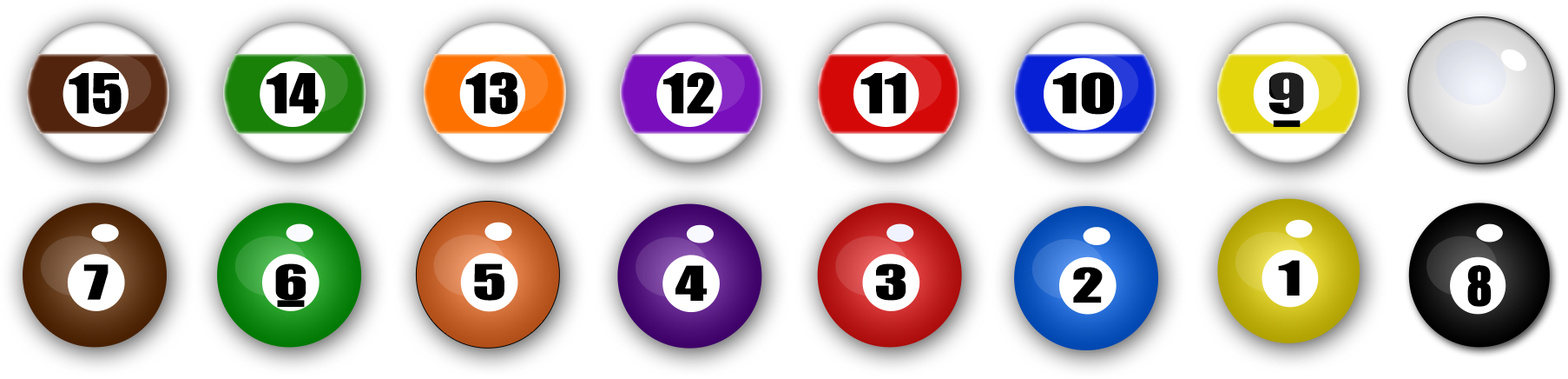
<style>
.page{position:relative;width:1568px;height:379px;background:#ffffff}
.page>*{position:absolute;margin:0}
.t1{font:50.9px "Impact";color:#000000;scale:1.17 1}
.t2{font:50.9px "Impact";color:#000000;scale:1.23 1}
.t3{font:50.9px "Impact";color:#000000;scale:1.36 1}
.t4{font:50.9px "Impact";color:#1f1f1f;scale:1.43 1}
.t5{font:44.1px "Impact";color:#000000;scale:1.44 1}
.t6{font:45.1px "Impact";color:#000000;scale:1.41 1}
.t7{font:44.2px "Impact";color:#000000;scale:1.42 1}
.t8{font:50.1px "Impact";color:#000000}
</style>
<div class="page">
<p class="t1" style="left:69px;top:73px;width:53px;height:42px">15</p>
<p class="t1" style="left:267px;top:73px;width:52px;height:41px">14</p>
<p class="t1" style="left:465px;top:72px;width:53px;height:43px">13</p>
<p class="t1" style="left:663px;top:72px;width:52px;height:42px">12</p>
<p class="t2" style="left:860px;top:73px;width:46px;height:41px">11</p>
<p class="t3" style="left:1052px;top:72px;width:63px;height:43px">10</p>
<p class="t4" style="left:1268px;top:72px;width:36px;height:43px">9</p>
<p class="t5" style="left:83px;top:264px;width:26px;height:36px">7</p>
<p class="t5" style="left:275px;top:263px;width:31px;height:37px">6</p>
<p class="t6" style="left:474px;top:263px;width:30px;height:37px">5</p>
<p class="t5" style="left:675px;top:265px;width:32px;height:35px">4</p>
<p class="t5" style="left:876px;top:263px;width:30px;height:37px">3</p>
<p class="t5" style="left:1073px;top:267px;width:30px;height:36px">2</p>
<p class="t7" style="left:1278px;top:260px;width:22px;height:35px">1</p>
<p class="t8" style="left:1467px;top:265px;width:25px;height:41px">8</p>
</div>
